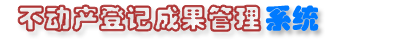
<style>
.page{position:relative;width:400px;height:41px;background:#ffffff}
.page>*{position:absolute;margin:0}
.t1{font:27px "STCaiyun";letter-spacing:0.005em;color:#a72323}
.t2{font:27px "STHupo";letter-spacing:0.005em;color:#007aff}
</style>
<div class="page">
<p class="t1" style="left:18px;top:5px;width:243px;height:27px">不动产登记成果管理</p>
<p class="t2" style="left:265px;top:5px;width:54px;height:26px">系统</p>
</div>
